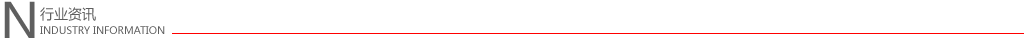
<style>
.page{position:relative;width:1024px;height:40px;background:#ffffff}
.page>*{position:absolute;margin:0}
.t1{font:48px "MicrosoftYaHei";color:#5f5f5f;text-transform:uppercase}
.t2{font:14px "MicrosoftYaHei";color:#5f5f5f;text-transform:uppercase}
.t3{font:10px "MicrosoftYaHei";color:#5f5f5f;text-transform:uppercase}
</style>
<div class="page">
<p class="t1" style="left:4px;top:1px;width:31px;height:37px">N</p>
<p class="t2" style="left:40px;top:7px;width:56px;height:14px">行业资讯</p>
<p class="t3" style="left:40px;top:26px;width:125px;height:8px">Industry information</p>
</div>
